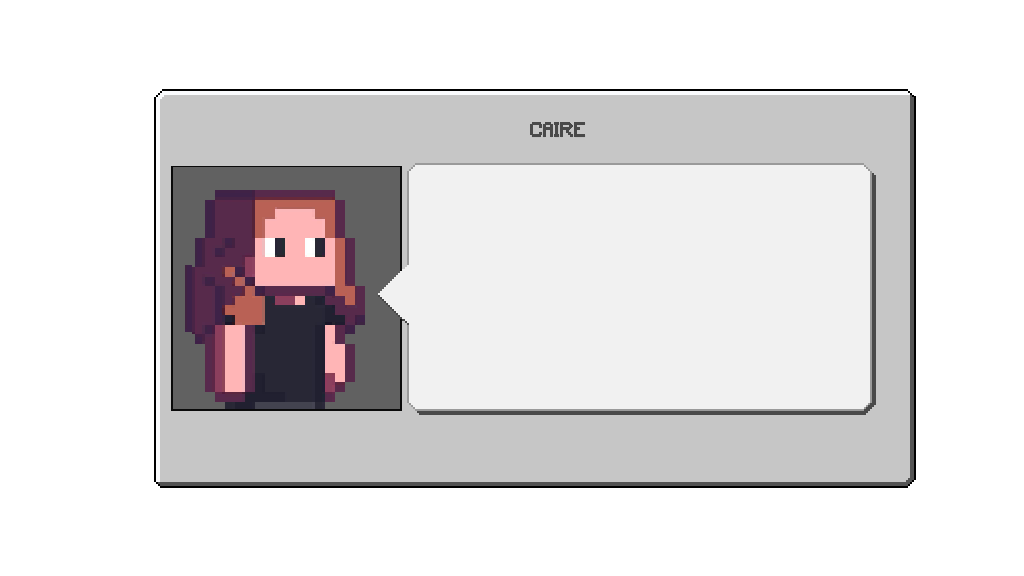
<style>
.page{position:relative;width:1024px;height:576px;background:#ffffff}
.page>*{position:absolute;margin:0}
.t1{font:19.6px "Minecraft";letter-spacing:0.02em;color:#494949;text-transform:uppercase;scale:0.86 1}
</style>
<div class="page">
<p class="t1" style="left:530px;top:122px;width:56px;height:16px">caire</p>
</div>
